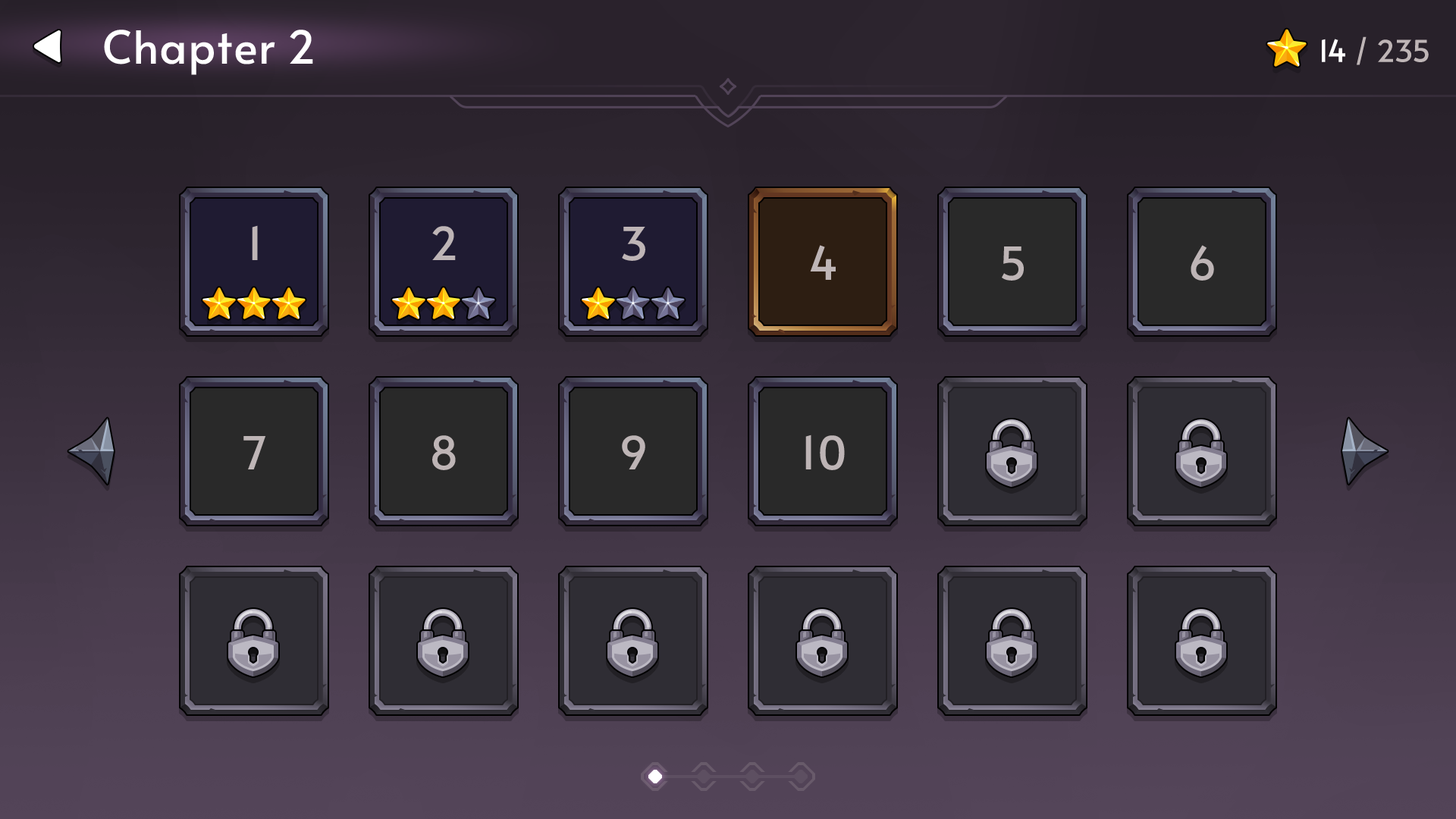
<style>
.page{position:relative;width:1456px;height:819px}
.page>*{position:absolute;margin:0}
.t1{font:45.5px "Alata-Regular";color:#ffffff}
.t2{font:30.3px "Alata-Regular";color:#beb5b6}
.t3{font:30.3px "Alata-Regular";color:#ffffff}
.t4{font:45.5px "Alata-Regular";color:#beb5b6}
</style>
<div class="page">
<p class="t1" style="left:104px;top:30px;width:209px;height:45px">Chapter 2</p>
<p class="t2" style="left:1322px;top:36px;width:107px;height:29px"><span class="t3">14 </span>/ 235</p>
<p class="t4" style="left:252px;top:225px;width:6px;height:35px">1</p>
<p class="t4" style="left:432px;top:226px;width:24px;height:34px">2</p>
<p class="t4" style="left:622px;top:227px;width:23px;height:34px">3</p>
<p class="t4" style="left:810px;top:245px;width:26px;height:35px">4</p>
<p class="t4" style="left:1191px;top:245px;width:23px;height:36px">6</p>
<p class="t4" style="left:1002px;top:246px;width:22px;height:35px">5</p>
<p class="t4" style="left:243px;top:436px;width:23px;height:33px">7</p>
<p class="t4" style="left:432px;top:435px;width:24px;height:35px">8</p>
<p class="t4" style="left:622px;top:435px;width:23px;height:34px">9</p>
<p class="t4" style="left:805px;top:435px;width:40px;height:35px">10</p>
</div>
